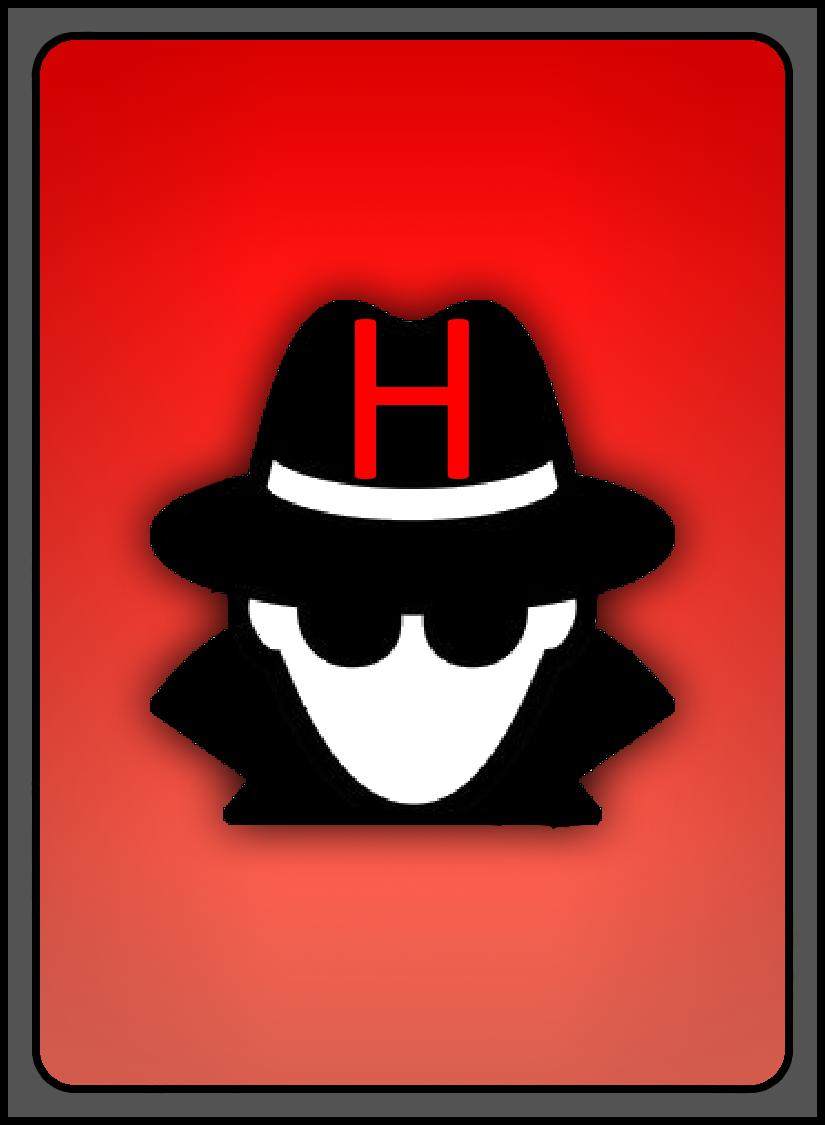
<style>
.page{position:relative;width:825px;height:1125px;background:#000000}
.page>*{position:absolute;margin:0}
.t1{font:250px "Calibri";color:#ff0000}
</style>
<div class="page">
<p class="t1" style="left:354px;top:319px;width:115px;height:160px">H</p>
</div>
